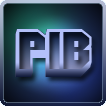
<style>
.page{position:relative;width:106px;height:106px}
.page>*{position:absolute;margin:0}
.t1{font:53.4px "DimitriSwank";scale:1.03 1}
</style>
<div class="page">
<p class="t1" style="left:15px;top:29px;width:77px;height:48px">PIB</p>
</div>
